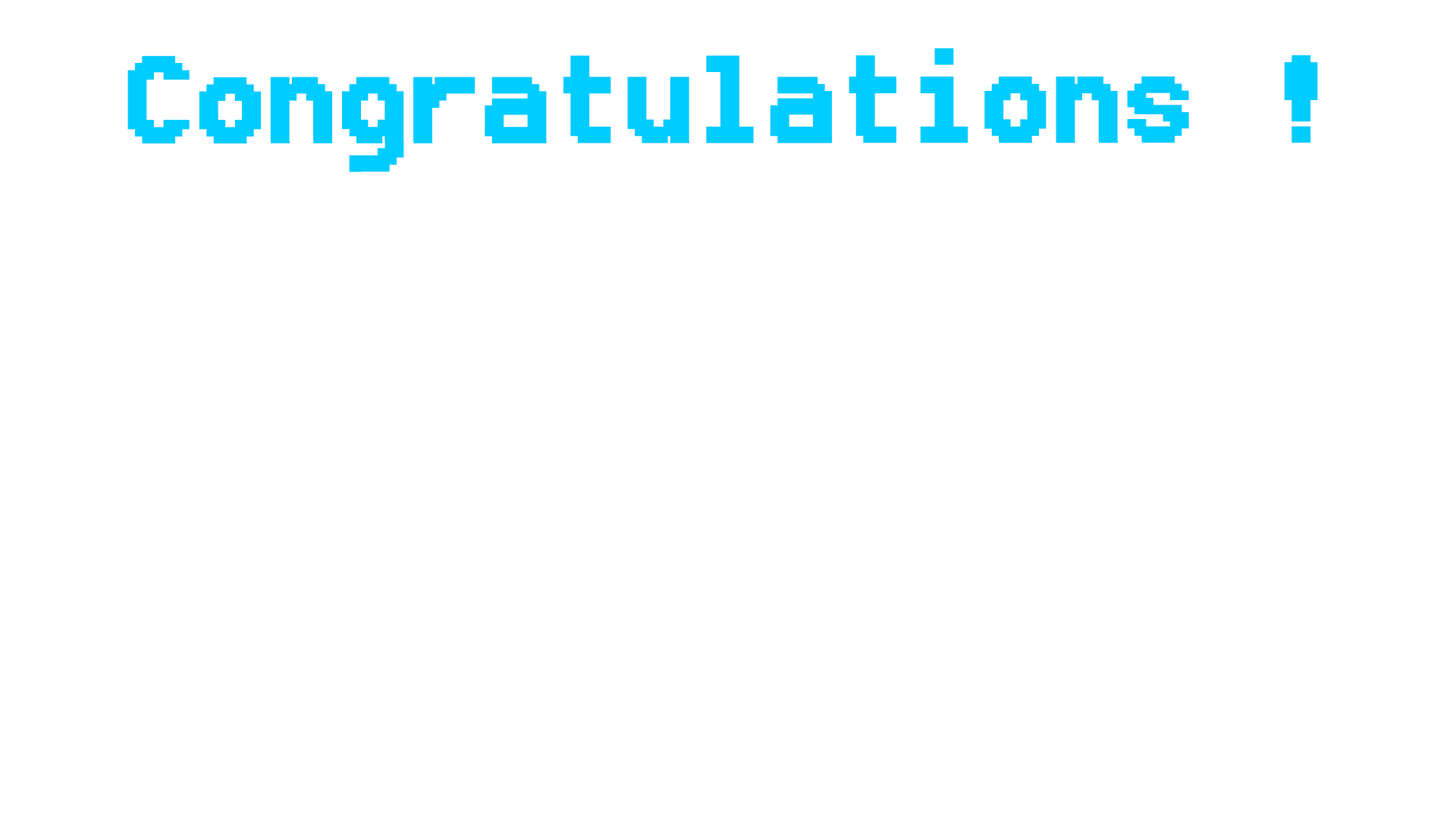
<style>
.page{position:relative;width:1456px;height:819px;background:#ffffff}
.page>*{position:absolute;margin:0}
.t1{font:151.7px "8514oem";color:#00ccff;font-weight:bold}
</style>
<div class="page">
<p class="t1" style="left:127px;top:48px;width:1191px;height:124px">Congratulations !</p>
</div>
